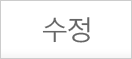
<style>
.page{position:relative;width:132px;height:59px;background:#ffffff}
.page>*{position:absolute;margin:0}
.t1{font:28px "YDVYGO32";color:#666666;scale:0.95 1}
</style>
<div class="page">
<p class="t1" style="left:42px;top:17px;width:48px;height:26px">수정</p>
</div>
